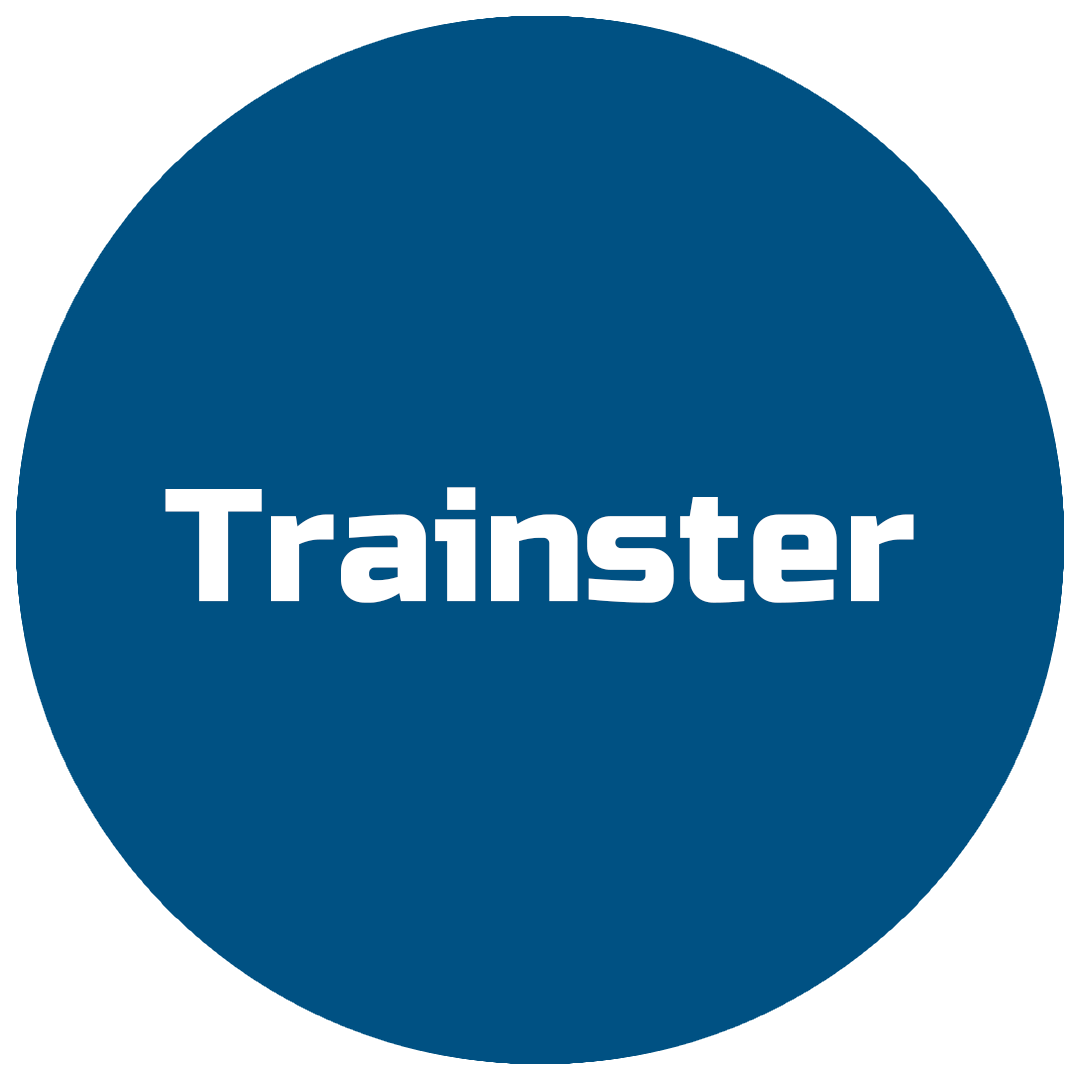
<style>
.page{position:relative;width:1080px;height:1080px;background:#005183}
.page>*{position:absolute;margin:0}
.t1{font:160px "RussoOne-Regular";color:#ffffff}
</style>
<div class="page">
<p class="t1" style="left:165px;top:487px;width:749px;height:116px">Trainster</p>
</div>
